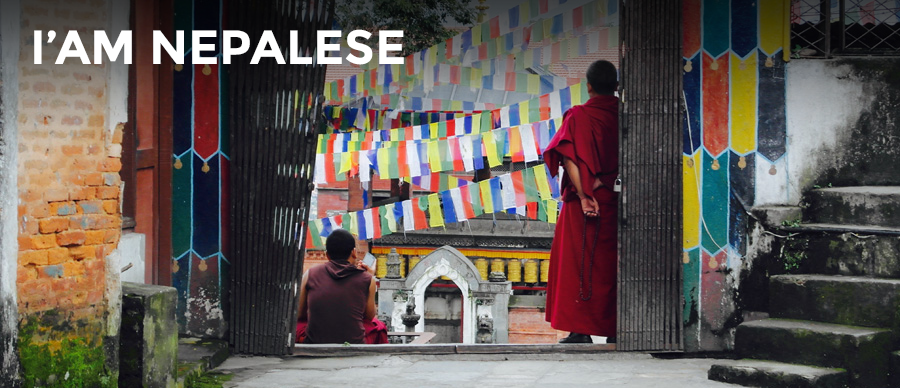
<style>
.page{position:relative;width:900px;height:388px}
.page>*{position:absolute;margin:0}
.t1{font:48px "Montserrat-Bold";color:#ffffff}
</style>
<div class="page">
<p class="t1" style="left:34px;top:29px;width:370px;height:36px">I’AM NEPALESE</p>
</div>
